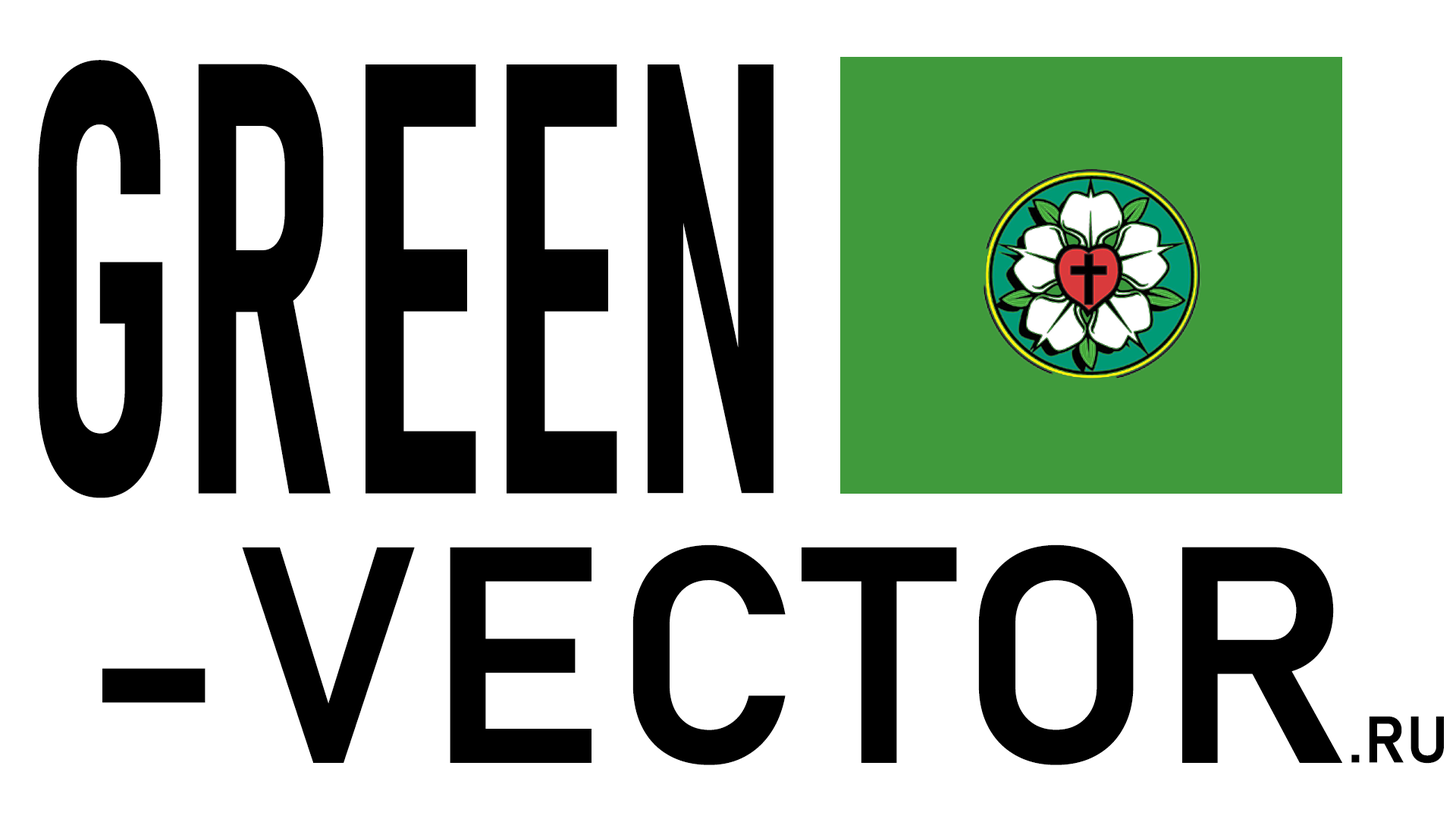
<style>
.page{position:relative;width:1456px;height:819px;background:#ffffff}
.page>*{position:absolute;margin:0}
.t1{font:604.1px "Bahnschrift-SemiBoldCondensed";letter-spacing:0.02em;color:#000000;text-transform:uppercase;scale:0.59 1}
.t2{font:303.3px "Bahnschrift-SemiBold";letter-spacing:0.02em;color:#000000;text-transform:uppercase}
.t3{font:64.6px "Bahnschrift-SemiBold";letter-spacing:0.02em;color:#000000;text-transform:uppercase}
</style>
<div class="page">
<p class="t1" style="left:38px;top:60px;width:735px;height:438px">GREEN</p>
<p class="t2" style="left:102px;top:544px;width:1240px;height:221px">vector</p>
<p class="t3" style="left:1351px;top:716px;width:93px;height:48px">.ru</p>
</div>
